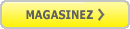
<style>
.page{position:relative;width:130px;height:29px}
.page>*{position:absolute;margin:0}
.t1{font:12px "Verdana-Bold";color:#606161;scale:0.83 1}
</style>
<div class="page">
<p class="t1" style="left:26px;top:10px;width:67px;height:10px">MAGASINEZ</p>
</div>
